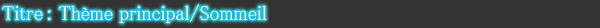
<style>
.page{position:relative;width:600px;height:28px;background:#333333}
.page>*{position:absolute;margin:0}
.t1{font:20px "MS-PMincho";color:#ffffff}
</style>
<div class="page">
<p class="t1" style="left:2px;top:4px;width:265px;height:19px">Titre : Thème principal/Sommeil</p>
</div>
